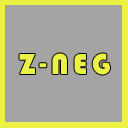
<style>
.page{position:relative;width:128px;height:128px;background:#a4a4a4}
.page>*{position:absolute;margin:0}
.t1{font:30px "Bauhaus93";letter-spacing:0.15em;color:#ecf245;text-transform:uppercase}
</style>
<div class="page">
<p class="t1" style="left:19px;top:53px;width:91px;height:22px">Z-neg</p>
</div>
